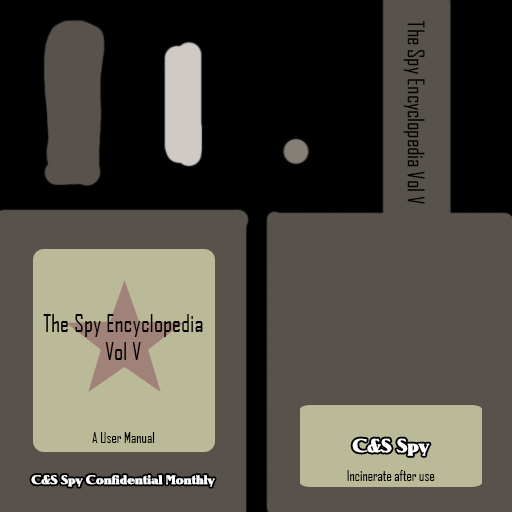
<style>
.page{position:relative;width:512px;height:512px;background:#58524d}
.page>*{position:absolute;margin:0}
.t1{font:22px "AgencyFB-Reg";color:#000000}
.t2{font:24px "AgencyFB-Reg";color:#000000}
.t3{font:14px "AgencyFB-Reg";color:#000000}
.t4{font:18px "Notram";color:#ffffff}
.t5{font:12px "Notram";color:#ffffff}
</style>
<div class="page">
<p class="t1" style="left:403px;top:21px;width:22px;height:183px;rotate:90deg">The Spy Encyclopedia Vol V</p>
<p class="t2" style="left:43px;top:314px;width:160px;height:46px;text-align:center">The Spy Encyclopedia<br>Vol V</p>
<p class="t3" style="left:92px;top:432px;width:63px;height:11px">A User Manual</p>
<p class="t4" style="left:352px;top:438px;width:78px;height:18px">C&amp;S Spy</p>
<p class="t3" style="left:347px;top:470px;width:88px;height:11px">Incinerate after use</p>
<p class="t5" style="left:31px;top:475px;width:184px;height:12px">C&amp;S Spy Confidential Monthly</p>
</div>
